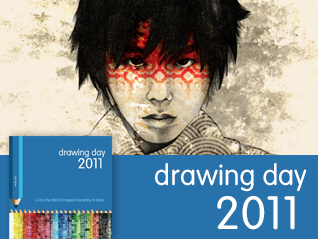
<style>
.page{position:relative;width:318px;height:239px;background:#2772ab}
.page>*{position:absolute;margin:0}
.t1{font:28.4px "VAGRounded-Light";color:#ffffff}
.t2{font:46.1px "VAGRounded-Light";color:#ffffff}
</style>
<div class="page">
<p class="t1" style="left:155px;top:163px;width:152px;height:29px">drawing day</p>
<p class="t2" style="left:217px;top:196px;width:78px;height:34px">2011</p>
</div>
